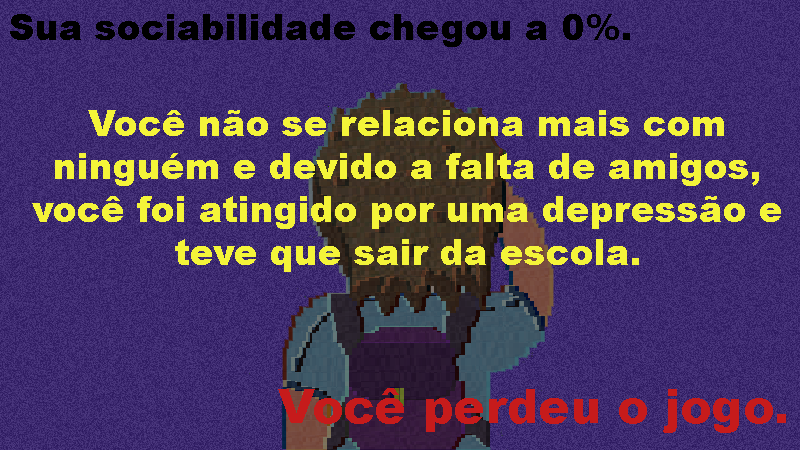
<style>
.page{position:relative;width:800px;height:450px}
.page>*{position:absolute;margin:0}
.t1{font:36px "Arial-Black";color:#000000}
.t2{font:36px "Arial-Black";color:#f4f439}
.t3{font:36px/80px "Arial-Black";color:#f4f439}
.t4{font:47.2px "Arial-Black";color:#c61b1b}
</style>
<div class="page">
<p class="t1" style="left:10px;top:14px;width:620px;height:33px">Sua sociabilidade chegou a 0%.</p>
<p class="t2" style="left:32px;top:110px;width:749px;height:162px;text-align:center"><span class="t3">Você não se relaciona mais c</span>om ninguém e devido a falta de amigos, você foi atingido por uma depressão e teve que sair da escola.</p>
<p class="t4" style="left:278px;top:388px;width:508px;height:45px">Você perdeu o jogo.</p>
</div>
